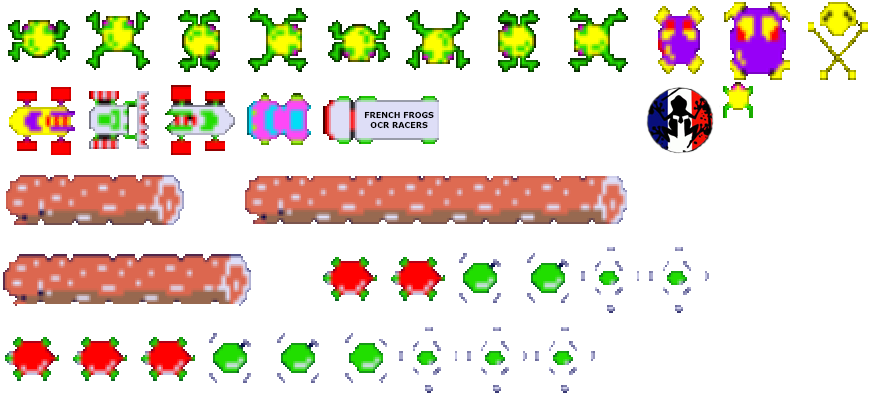
<style>
.page{position:relative;width:880px;height:400px;background:#ffffff}
.page>*{position:absolute;margin:0}
.t1{font:8px "Verdana-Bold";color:#000000}
</style>
<div class="page">
<p class="t1" style="left:364px;top:111px;width:70px;height:18px;text-align:center">FRENCH FROGS<br>OCR RACERS</p>
</div>
